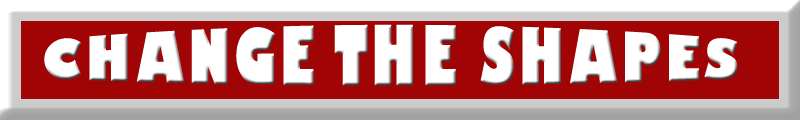
<style>
.page{position:relative;width:800px;height:120px;background:#a00404}
.page>*{position:absolute;margin:0}
.t1{font:50px "GillSans-UltraBold";letter-spacing:0.06em;color:#ffffff}
</style>
<div class="page">
<p class="t1" style="left:44px;top:24px;width:694px;height:62px">CHANGE THE SHAPES</p>
</div>
